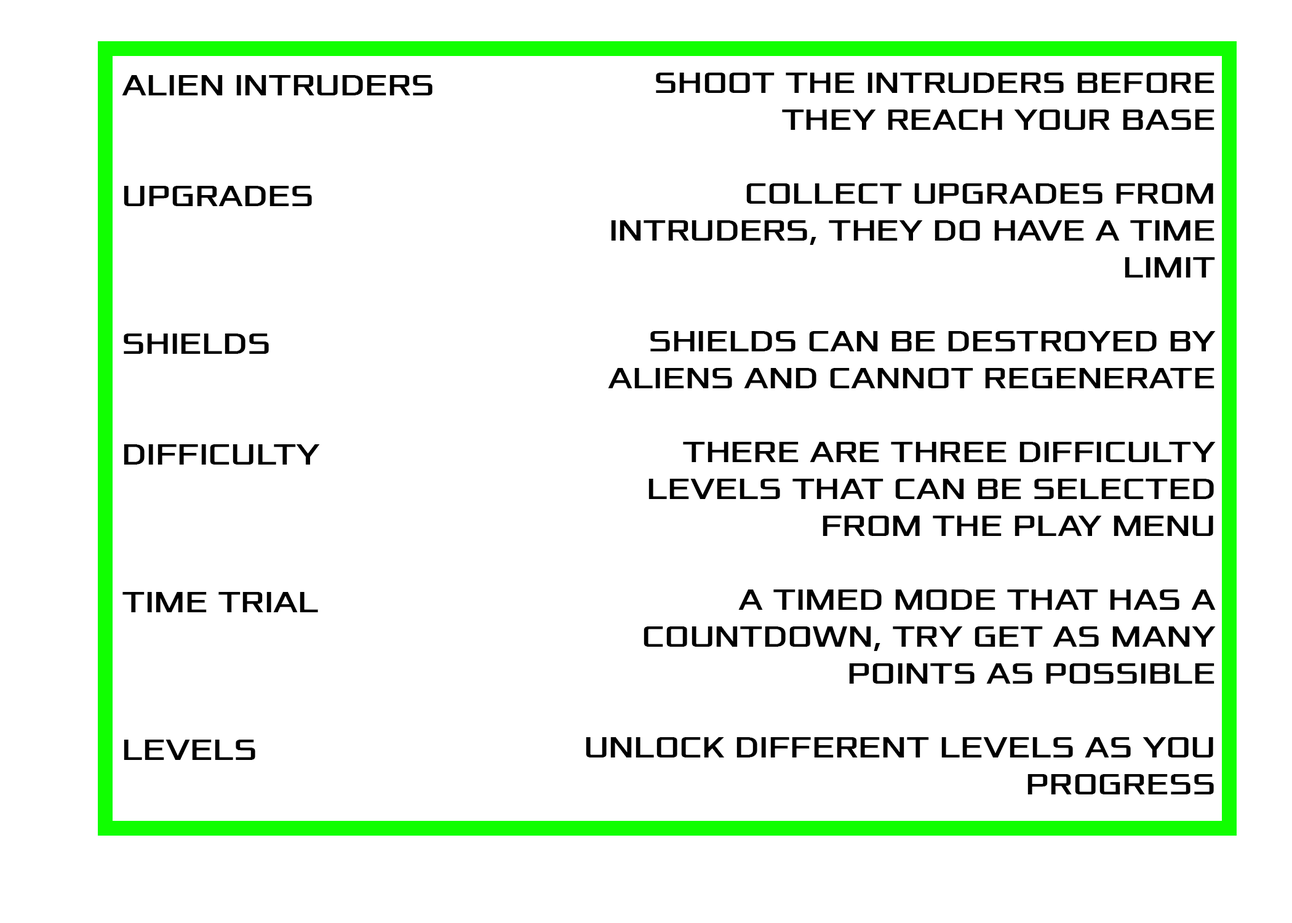
<style>
.page{position:relative;width:1292px;height:923px;background:#ffffff}
.page>*{position:absolute;margin:0}
.t1{font:30.8px "Xolonium";color:#000000}
</style>
<div class="page">
<p class="t1" style="left:122px;top:75px;width:311px;height:685px">ALIEN INTRUDERS<br><br><br>UPGRADES<br><br><br><br>SHIELDS<br><br><br>DIFFICULTY<br><br><br><br>TIME TRIAL<br><br><br><br>LEVELS</p>
<p class="t1" style="left:586px;top:73px;width:630px;height:721px;text-align:right">SHOOT THE INTRUDERS BEFORE THEY REACH YOUR BASE<br><br>COLLECT UPGRADES FROM INTRUDERS, THEY DO HAVE A TIME LIMIT<br><br>SHIELDS CAN BE DESTROYED BY ALIENS AND CANNOT REGENERATE<br><br>THERE ARE THREE DIFFICULTY LEVELS THAT CAN BE SELECTED FROM THE PLAY MENU<br><br>A TIMED MODE THAT HAS A COUNTDOWN, TRY GET AS MANY POINTS AS POSSIBLE<br><br>UNLOCK DIFFERENT LEVELS AS YOU PROGRESS</p>
</div>
